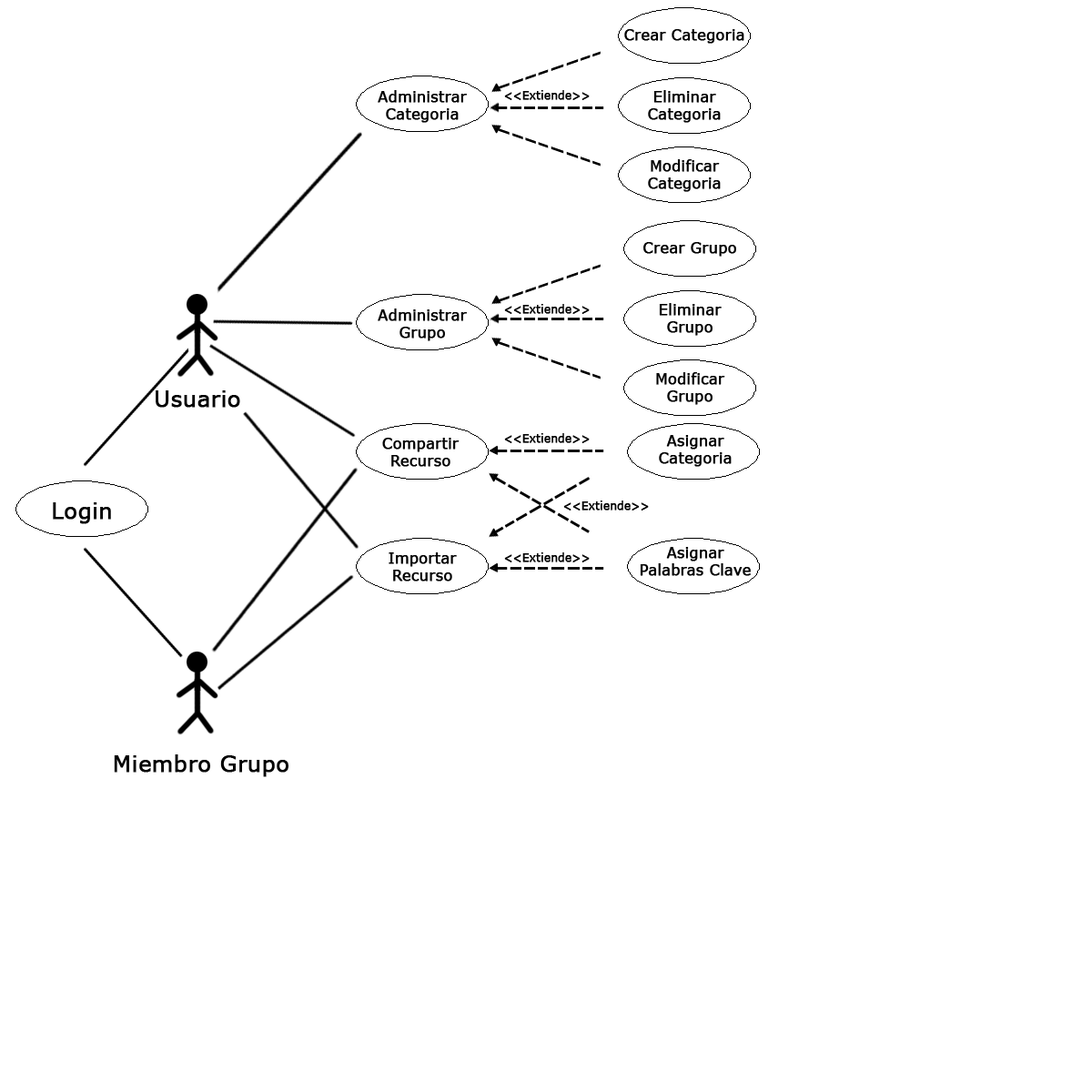
<style>
.page{position:relative;width:1092px;height:1092px;background:#ffffff}
.page>*{position:absolute;margin:0}
.t1{font:14.6px "MSReferenceSansSerif";color:#000000;font-weight:bold}
.t2{font:10.9px "MSReferenceSansSerif";color:#000000;font-weight:bold}
.t3{font:21.8px "MSReferenceSansSerif";color:#000000;font-weight:bold}
</style>
<div class="page">
<p class="t1" style="left:624px;top:29px;width:120px;height:15px">Crear Categoria</p>
<p class="t1" style="left:378px;top:90px;width:89px;height:33px;text-align:center">Administrar<br>Categoria</p>
<p class="t2" style="left:504px;top:90px;width:86px;height:10px">&lt;&lt;Extiende&gt;&gt;</p>
<p class="t1" style="left:648px;top:90px;width:73px;height:33px;text-align:center">Eliminar<br>Categoria</p>
<p class="t1" style="left:648px;top:159px;width:73px;height:33px;text-align:center">Modificar<br>Categoria</p>
<p class="t1" style="left:643px;top:242px;width:93px;height:15px">Crear Grupo</p>
<p class="t2" style="left:504px;top:304px;width:86px;height:10px">&lt;&lt;Extiende&gt;&gt;</p>
<p class="t1" style="left:659px;top:303px;width:63px;height:33px;text-align:center">Eliminar<br>Grupo</p>
<p class="t1" style="left:378px;top:308px;width:89px;height:33px;text-align:center">Administrar<br>Grupo</p>
<p class="t1" style="left:656px;top:372px;width:69px;height:33px;text-align:center">Modificar<br>Grupo</p>
<p class="t3" style="left:156px;top:390px;width:84px;height:18px">Usuario</p>
<p class="t1" style="left:382px;top:438px;width:78px;height:29px;text-align:center">Compartir<br>Recurso</p>
<p class="t2" style="left:504px;top:433px;width:86px;height:10px">&lt;&lt;Extiende&gt;&gt;</p>
<p class="t1" style="left:659px;top:435px;width:73px;height:32px;text-align:center">Asignar<br>Categoria</p>
<p class="t3" style="left:53px;top:502px;width:58px;height:22px">Login</p>
<p class="t2" style="left:563px;top:500px;width:86px;height:11px">&lt;&lt;Extiende&gt;&gt;</p>
<p class="t1" style="left:389px;top:552px;width:68px;height:29px;text-align:center">Importar<br>Recurso</p>
<p class="t2" style="left:504px;top:552px;width:86px;height:10px">&lt;&lt;Extiende&gt;&gt;</p>
<p class="t1" style="left:640px;top:547px;width:111px;height:29px;text-align:center">Asignar<br>Palabras Clave</p>
<p class="t3" style="left:114px;top:754px;width:174px;height:23px">Miembro Grupo</p>
</div>
